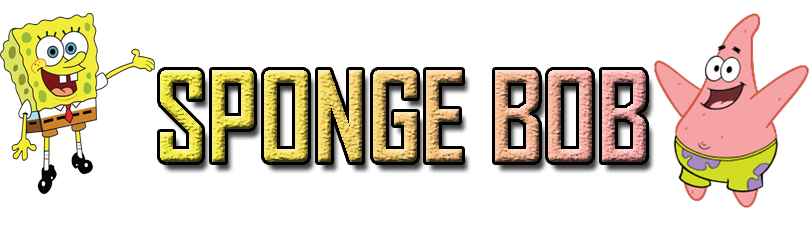
<style>
.page{position:relative;width:809px;height:250px;background:#ffffff}
.page>*{position:absolute;margin:0}
.t1{font:120.1px "AgencyFB-Bold";scale:0.95 1}
</style>
<div class="page">
<p class="t1" style="left:160px;top:70px;width:486px;height:92px">SPONGE BOB</p>
</div>
